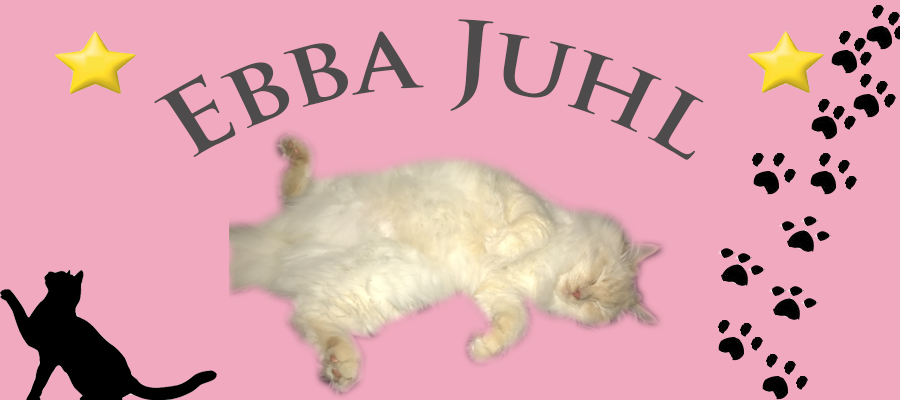
<style>
.page{position:relative;width:900px;height:400px;background:#f0a9be}
.page>*{position:absolute;margin:0}
.t1{font:88.9px "TrajanPro-Bold";color:#4d4b4b}
</style>
<div class="page">
<p class="t1" style="left:154px;top:19px;width:550px;height:141px">Ebba Juhl</p>
</div>
